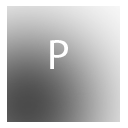
<style>
.page{position:relative;width:128px;height:128px;background:#ffffff}
.page>*{position:absolute;margin:0}
.t1{font:12px "MyriadPro-Regular";color:#ffffff}
</style>
<div class="page">
<p class="t1" style="left:50px;top:40px;width:18px;height:29px">P</p>
</div>
